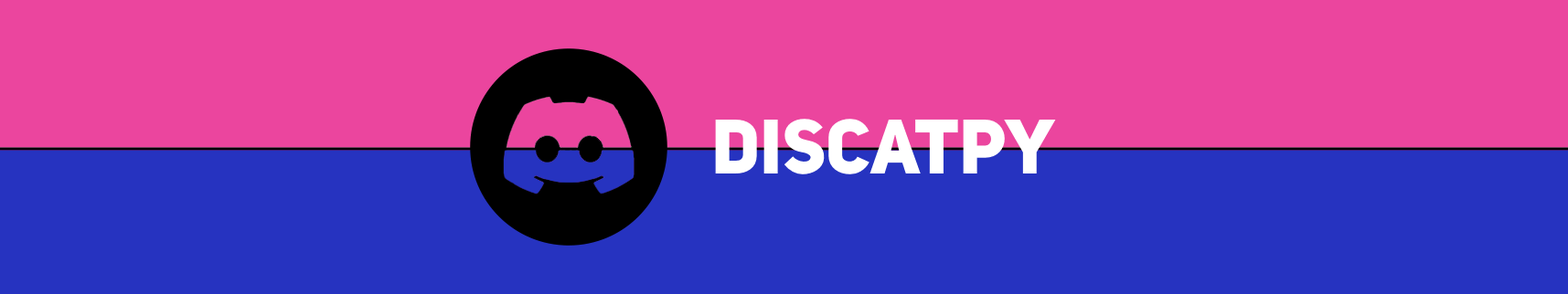
<style>
.page{position:relative;width:1568px;height:294px;background:#eb459e}
.page>*{position:absolute;margin:0}
.t1{font:76.2px "UniSansHeavyCAPS";letter-spacing:0.005em;color:#ffffff}
</style>
<div class="page">
<p class="t1" style="left:715px;top:119px;width:341px;height:56px">DisCatPy</p>
</div>
